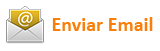
<style>
.page{position:relative;width:160px;height:51px;background:#ffffff}
.page>*{position:absolute;margin:0}
.t1{font:20px "Calibri-Bold";color:#f87f0a}
</style>
<div class="page">
<p class="t1" style="left:52px;top:17px;width:101px;height:14px">Enviar Email</p>
</div>
